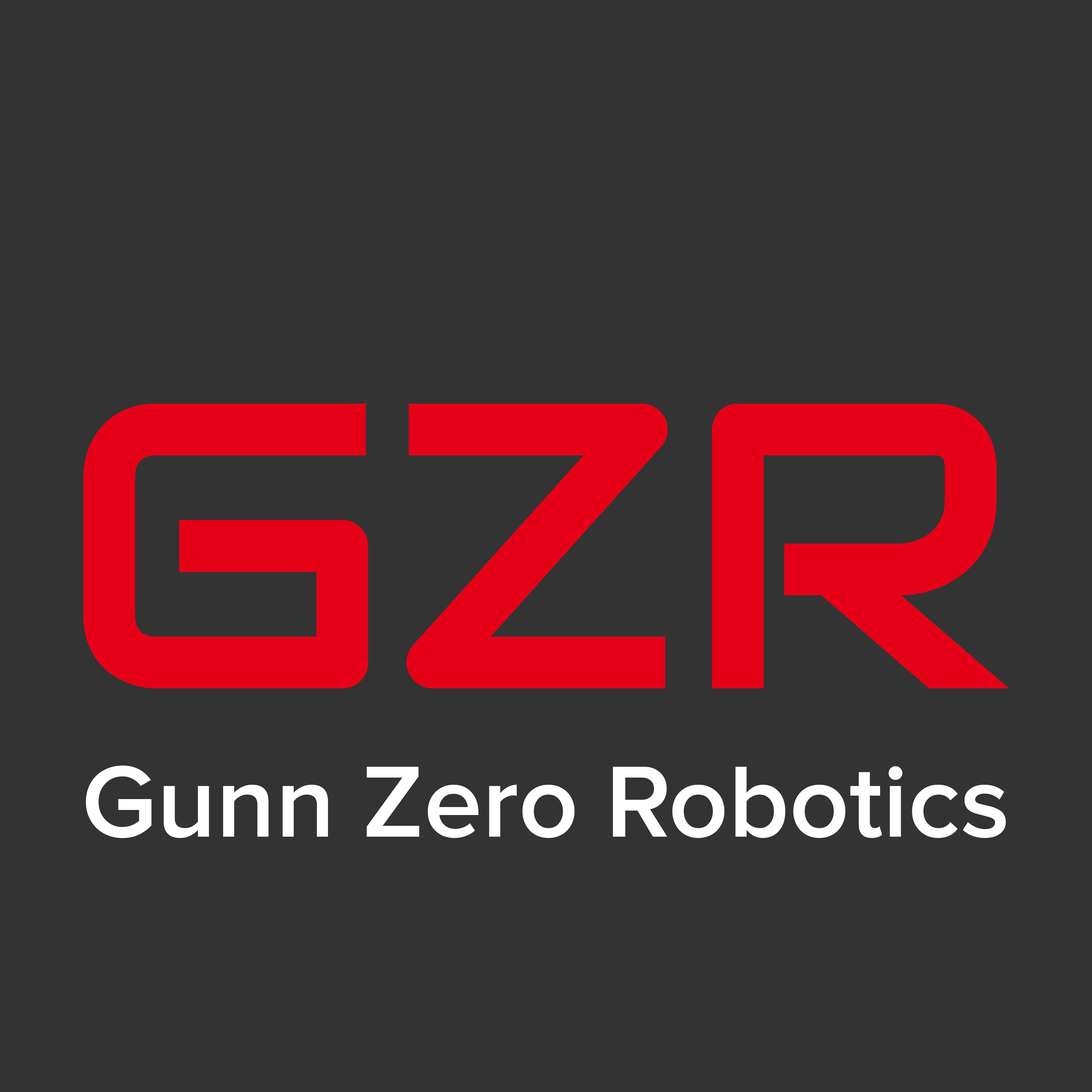
<style>
.page{position:relative;width:1092px;height:1092px;background:#333333}
.page>*{position:absolute;margin:0}
.t1{font:406.6px "Audiowide-Regular";color:#e60017}
.t2{font:104.8px "ProximaNova-Semibold";color:#ffffff}
</style>
<div class="page">
<p class="t1" style="left:83px;top:404px;width:926px;height:284px">GZR</p>
<p class="t2" style="left:86px;top:765px;width:920px;height:73px">Gunn Zero Robotics</p>
</div>
